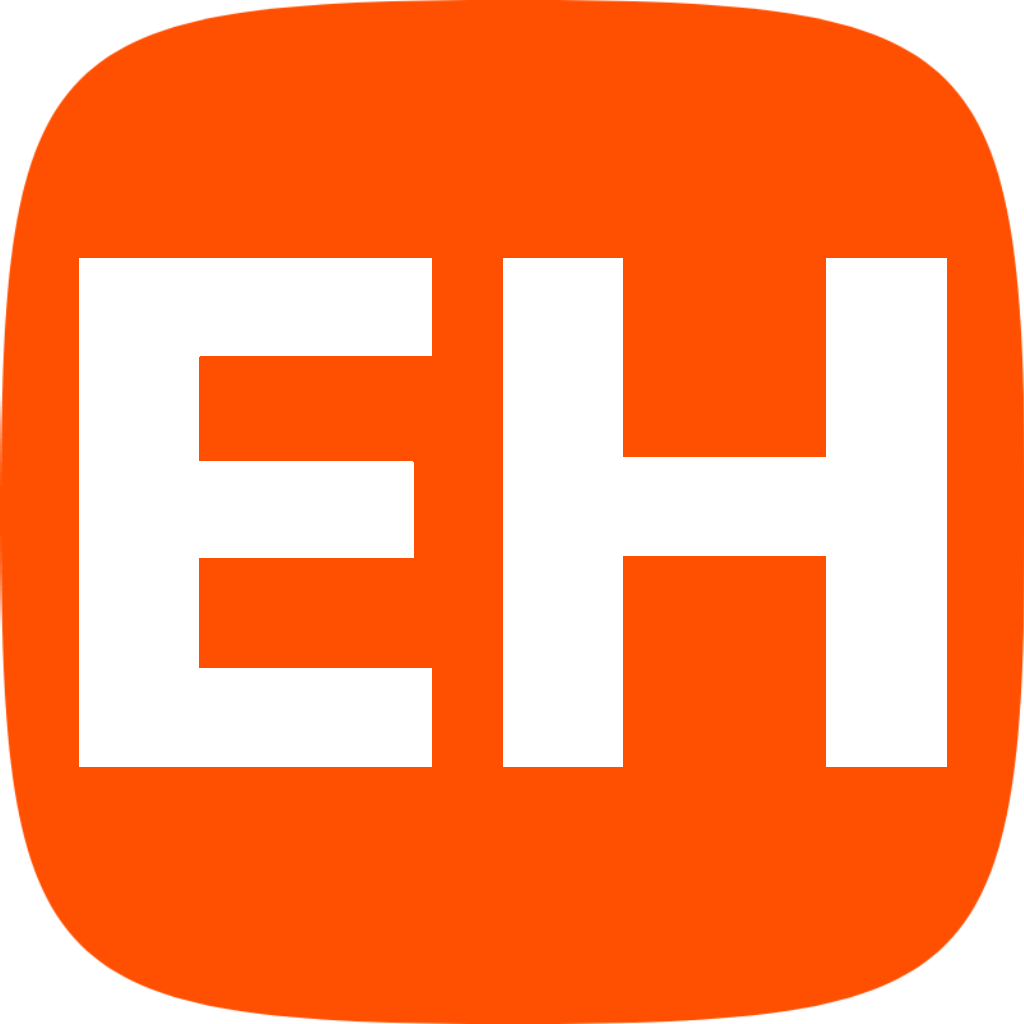
<style>
.page{position:relative;width:1024px;height:1024px;background:#ff4f00}
.page>*{position:absolute;margin:0}
.t1{font:700px "Inter-ExtraBold_14.000opsz_800.000wght";letter-spacing:-0.005em;color:#ffffff}
</style>
<div class="page">
<p class="t1" style="left:78px;top:257px;width:870px;height:510px">EH</p>
</div>
